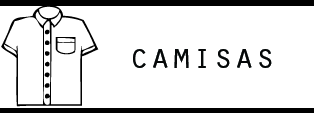
<style>
.page{position:relative;width:314px;height:113px;background:#ffffff}
.page>*{position:absolute;margin:0}
.t1{font:35px "OratorStd";color:#060808}
</style>
<div class="page">
<p class="t1" style="left:133px;top:49px;width:139px;height:19px">camisas</p>
</div>
